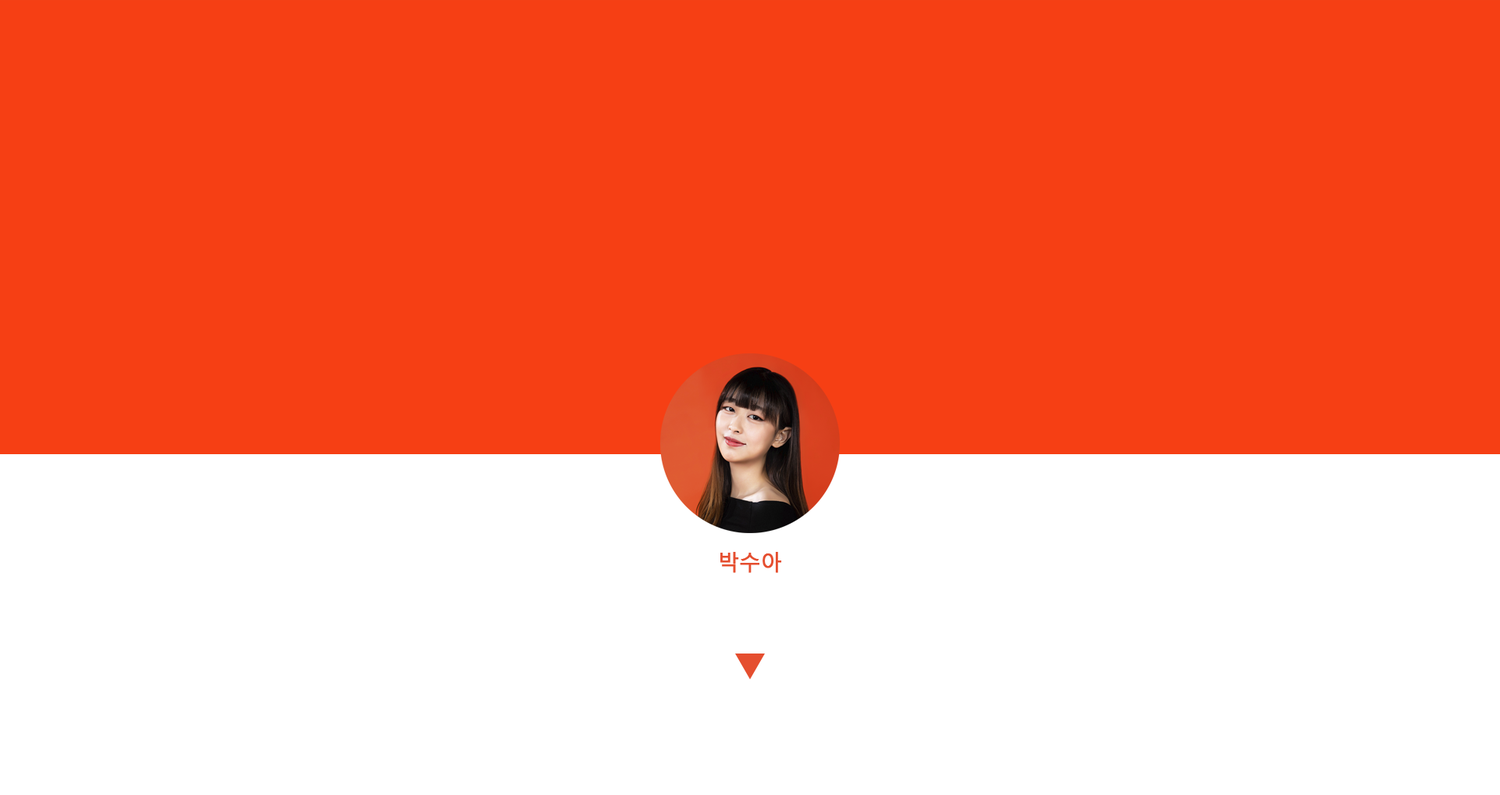
<style>
.page{position:relative;width:1500px;height:795px;background:#f63f14}
.page>*{position:absolute;margin:0}
.t1{font:20.8px "MalgunGothic";color:#e54e2f;font-weight:bold}
</style>
<div class="page">
<p class="t1" style="left:721px;top:552px;width:61px;height:21px">박수아</p>
</div>
